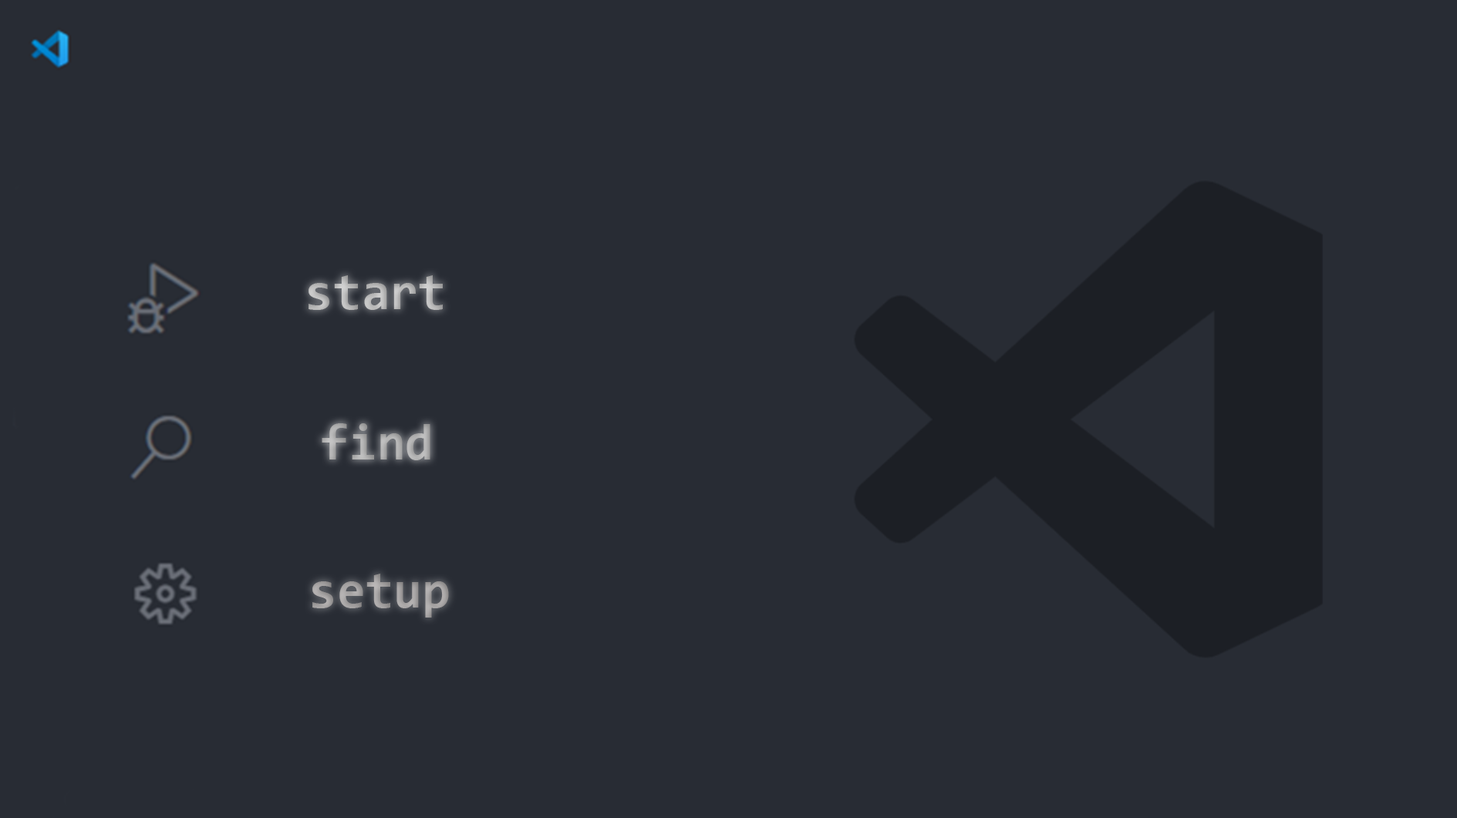
<style>
.page{position:relative;width:1457px;height:818px;background:#282c34}
.page>*{position:absolute;margin:0}
.t1{font:51.4px "Consolas-Bold";color:#bababa}
.t2{font:51.4px "Consolas-Bold";color:#b0b0b0}
.t3{font:51.4px "Consolas-Bold";color:#a6a3a3}
</style>
<div class="page">
<p class="t1" style="left:309px;top:275px;width:134px;height:35px">start</p>
<p class="t2" style="left:322px;top:423px;width:108px;height:37px">find</p>
<p class="t3" style="left:312px;top:574px;width:137px;height:44px">setup</p>
</div>
